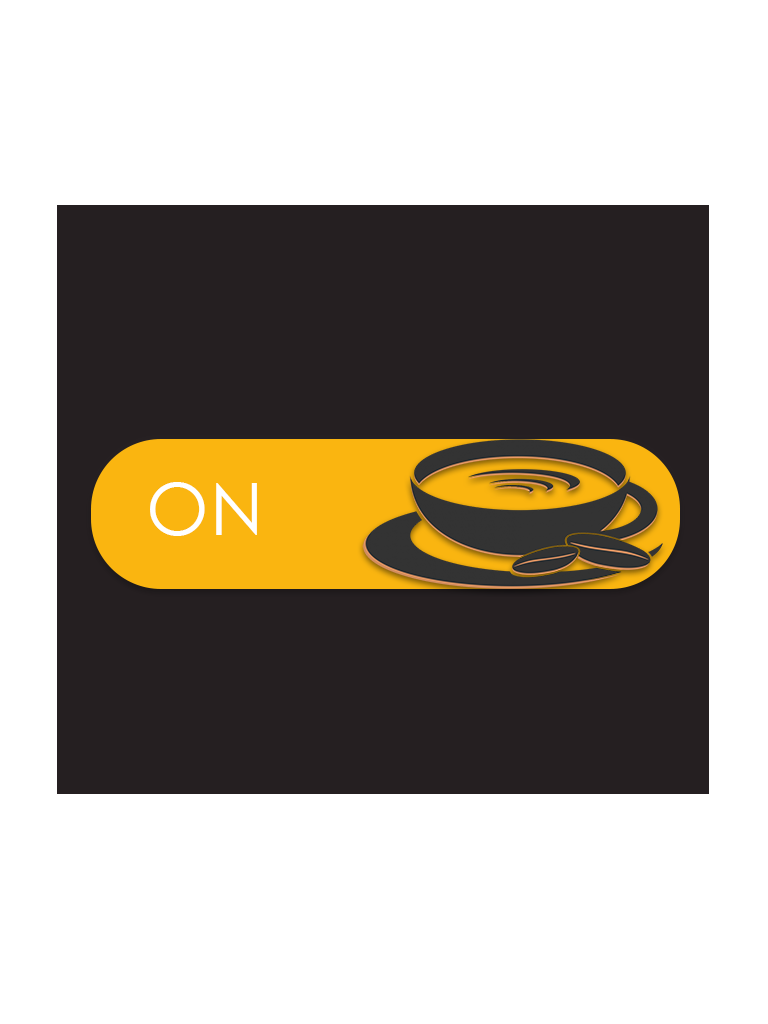
<style>
.page{position:relative;width:768px;height:1024px;background:#ffffff}
.page>*{position:absolute;margin:0}
.t1{font:72px "CenturyGothic";letter-spacing:0.025em;color:#ffffff}
</style>
<div class="page">
<p class="t1" style="left:150px;top:482px;width:107px;height:54px">ON</p>
</div>
